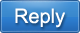
<style>
.page{position:relative;width:80px;height:33px}
.page>*{position:absolute;margin:0}
.t1{font:20px "ArialMT";color:#ffffff}
</style>
<div class="page">
<p class="t1" style="left:14px;top:6px;width:51px;height:23px">Reply</p>
</div>
